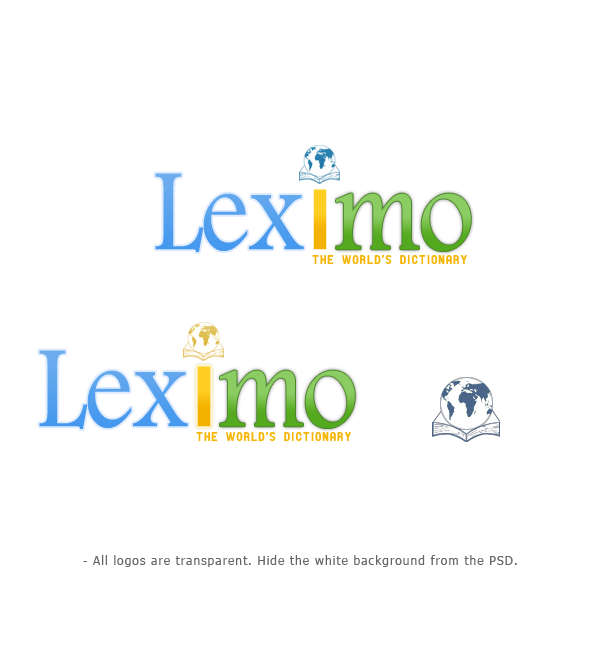
<style>
.page{position:relative;width:600px;height:645px;background:#ffffff}
.page>*{position:absolute;margin:0}
.t1{font:120.9px "FootlightMTLight";letter-spacing:-0.015em;color:#529fee;scale:0.9 1}
.t2{font:120.9px "FootlightMTLight";letter-spacing:-0.015em;scale:0.9 1}
.t3{font:12.2px "PTF-NORDIC-Round";letter-spacing:0.065em;color:#f5b505}
.t4{font:12.2px "Tahoma";letter-spacing:0.065em;color:#656565}
</style>
<div class="page">
<p class="t1" style="left:155px;top:173px;width:149px;height:79px">Lex</p>
<p class="t2" style="left:336px;top:193px;width:135px;height:58px">mo</p>
<p class="t3" style="left:312px;top:254px;width:155px;height:11px">the world’s dictionary</p>
<p class="t1" style="left:39px;top:350px;width:149px;height:79px">Lex</p>
<p class="t2" style="left:220px;top:370px;width:135px;height:58px">mo</p>
<p class="t3" style="left:196px;top:431px;width:155px;height:11px">the world’s dictionary</p>
<p class="t4" style="left:83px;top:555px;width:434px;height:12px">- All logos are transparent. Hide the white background from the PSD.</p>
</div>
